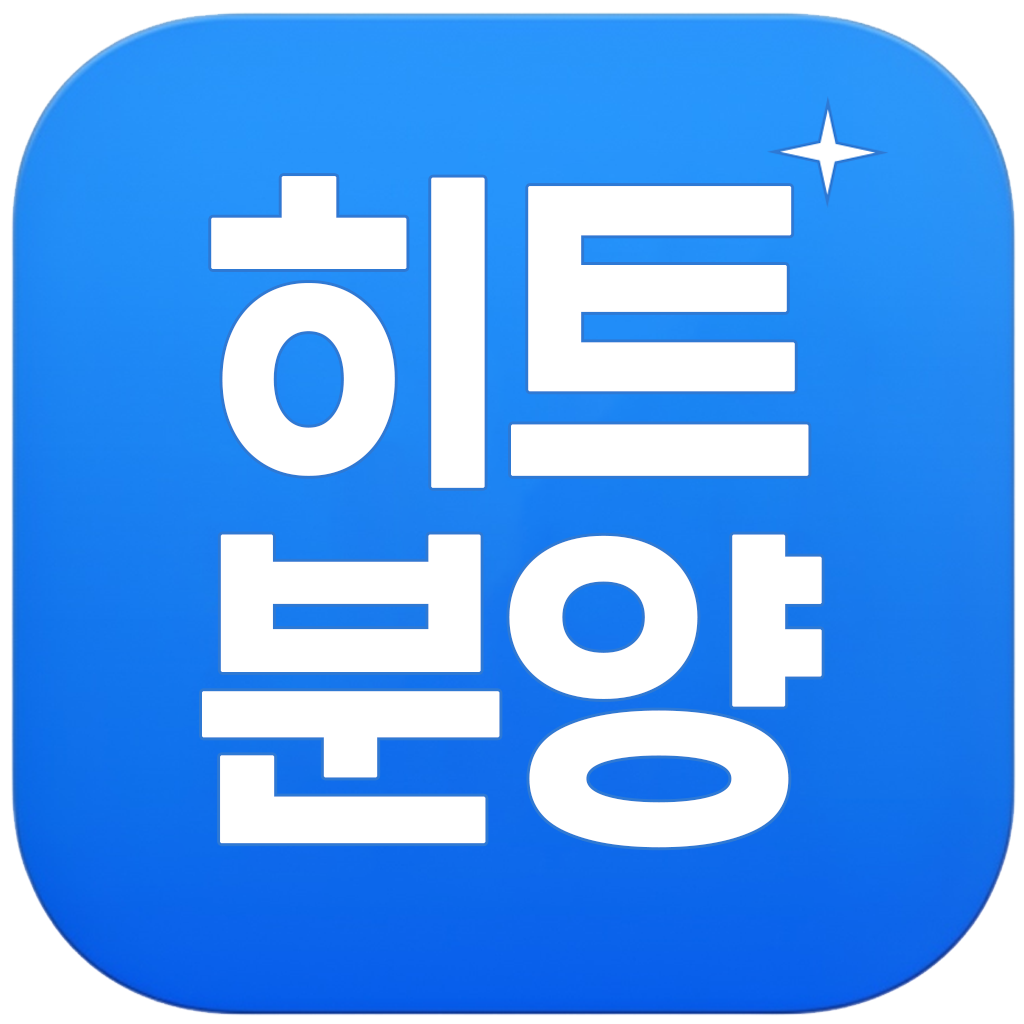
<style>
.page{position:relative;width:1024px;height:1024px;background:#ffffff}
.page>*{position:absolute;margin:0}
.t1{font:360.7px/356.6px "Paperlogy-7Bold";letter-spacing:-0.05em;color:#ffffff;font-weight:bold}
</style>
<div class="page">
<p class="t1" style="left:202px;top:176px;width:620px;height:672px">히트<br>분양</p>
</div>
